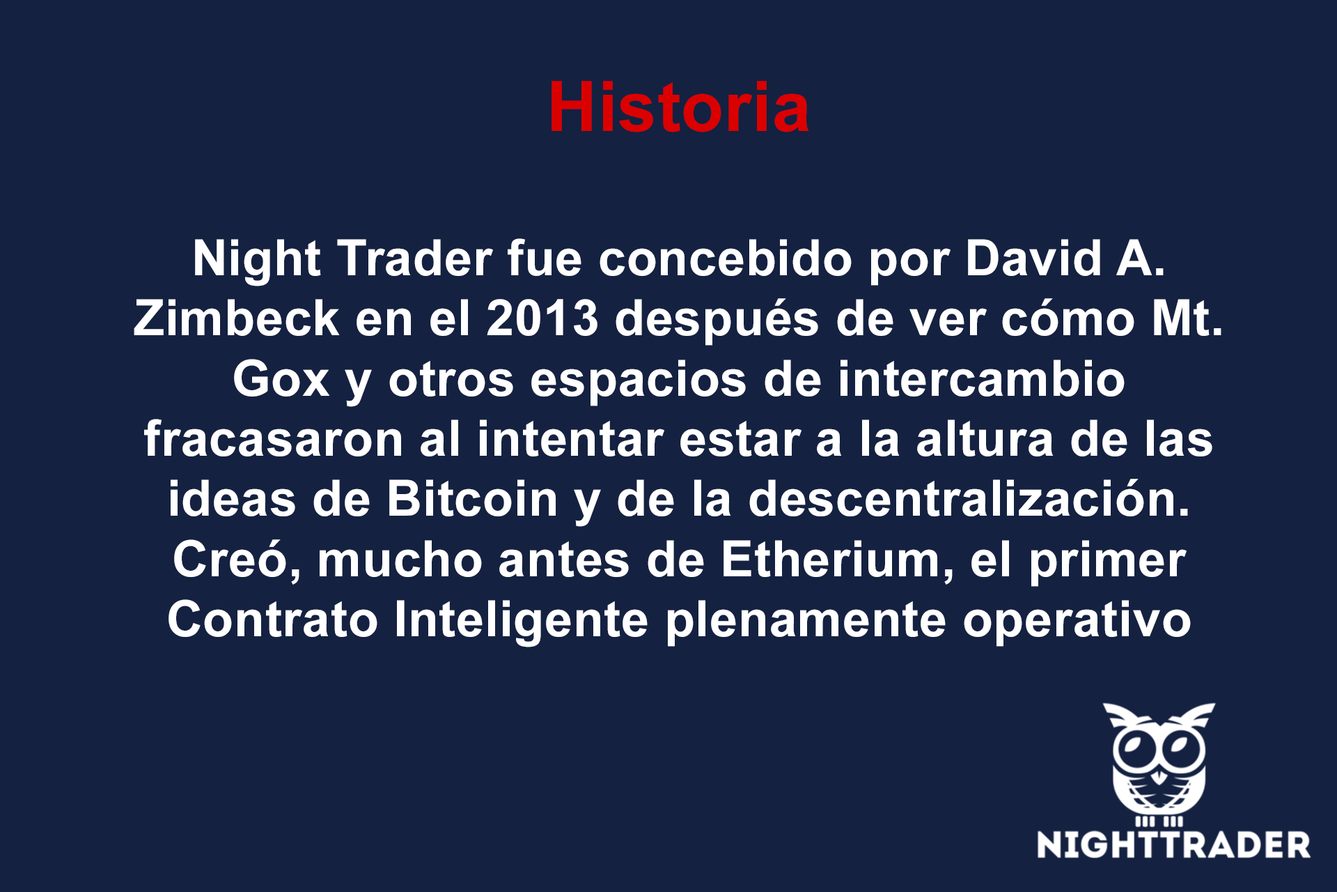
<style>
.page{position:relative;width:1337px;height:892px;background:#142141}
.page>*{position:absolute;margin:0}
.t1{font:50.2px "Arial-BoldMT";letter-spacing:0.01em;color:#ffffff}
.t2{font:69.7px "Arial-BoldMT";letter-spacing:0.01em;color:#db0000}
</style>
<div class="page">
<p class="t1" style="left:134px;top:81px;width:1088px;height:566px;text-align:center"><span class="t2">Historia<br><br></span>Night Trader fue concebido por David A. Zimbeck en el 2013 después de ver cómo Mt. Gox y otros espacios de intercambio <br>fracasaron al intentar estar a la altura de las ideas de Bitcoin y de la descentralización. Creó, mucho antes de Etherium, el primer Contrato Inteligente plenamente operativo para los clientes y aún se encuentra desarrollando activamente su plataforma llamada BitBay.</p>
</div>
